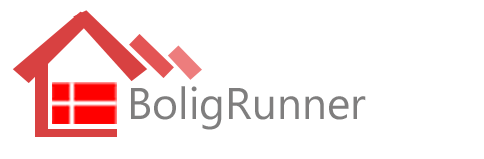
<style>
.page{position:relative;width:484px;height:159px;background:#ffffff}
.page>*{position:absolute;margin:0}
.t1{font:44.2px "KhmerUI";color:#7f7e7e}
</style>
<div class="page">
<p class="t1" style="left:131px;top:86px;width:235px;height:44px">BoligRunner</p>
</div>
